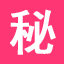
<style>
.page{position:relative;width:64px;height:64px;background:#ff3674}
.page>*{position:absolute;margin:0}
.t1{font:48px "SimHei";letter-spacing:-0.03em;color:#ffffff;font-weight:bold}
</style>
<div class="page">
<p class="t1" style="left:10px;top:9px;width:46px;height:46px">秘</p>
</div>
